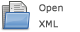
<style>
.page{position:relative;width:80px;height:32px;background:#ffffff}
.page>*{position:absolute;margin:0}
.t1{font:9px/0px "Verdana";color:#4f4f4f;font-weight:bold}
</style>
<div class="page">
<p class="t1" style="left:39px;top:4px;width:24px;height:24px">Open<br>XML</p>
</div>
